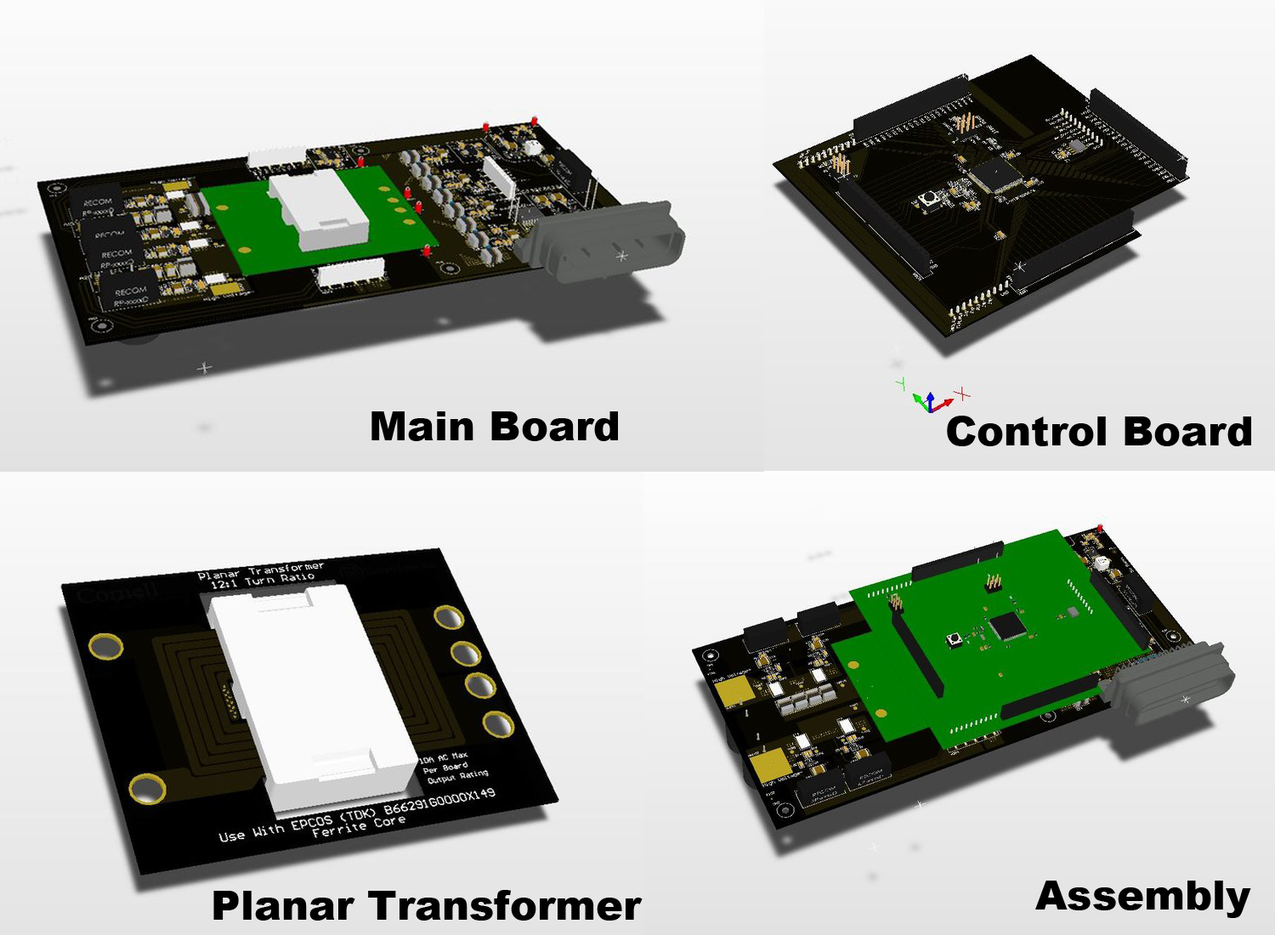
<style>
.page{position:relative;width:1275px;height:935px}
.page>*{position:absolute;margin:0}
.t1{font:40.8px "Arial-Black";color:#000000}
</style>
<div class="page">
<p class="t1" style="left:371px;top:411px;width:247px;height:30px">Main Board</p>
<p class="t1" style="left:947px;top:416px;width:304px;height:30px">Control Board</p>
<p class="t1" style="left:1035px;top:881px;width:216px;height:37px">Assembly</p>
<p class="t1" style="left:213px;top:890px;width:430px;height:31px">Planar Transformer</p>
</div>
